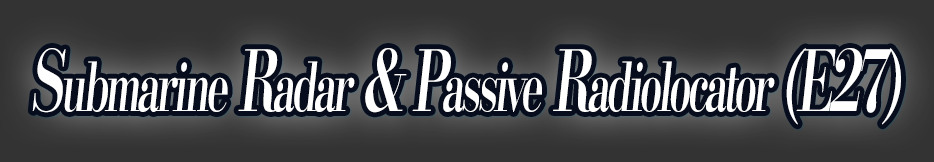
<style>
.page{position:relative;width:934px;height:162px;background:#333333}
.page>*{position:absolute;margin:0}
.t1{font:67.2px "KochoStd-Heavy";letter-spacing:-0.08em;color:#ffffff;font-style:italic;scale:0.61 1}
.t2{font:84px "KochoStd-Heavy";letter-spacing:-0.08em;color:#ffffff;font-style:italic;scale:0.61 1}
</style>
<div class="page">
<p class="t1" style="left:32px;top:48px;width:869px;height:77px"><span class="t2">S</span>ubmarine<span class="t2"> R</span>adar<span class="t2"> &amp; P</span>assive<span class="t2"> R</span>adiolocator<span class="t2"> (E27)</span></p>
</div>
